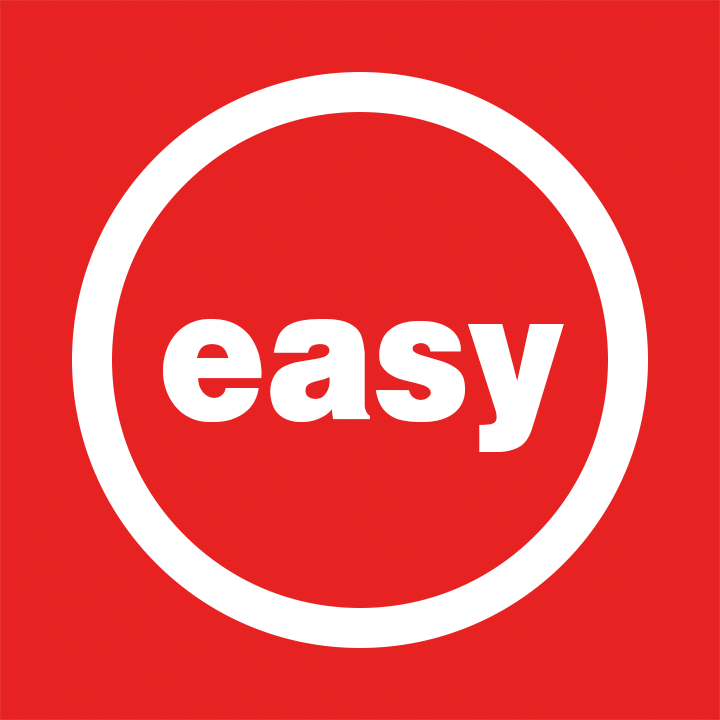
<style>
.page{position:relative;width:720px;height:720px;background:#e72222}
.page>*{position:absolute;margin:0}
.t1{font:183.2px "HeliosBlack";color:#ffffff;scale:0.87 1}
</style>
<div class="page">
<p class="t1" style="left:163px;top:319px;width:401px;height:133px">easy</p>
</div>
